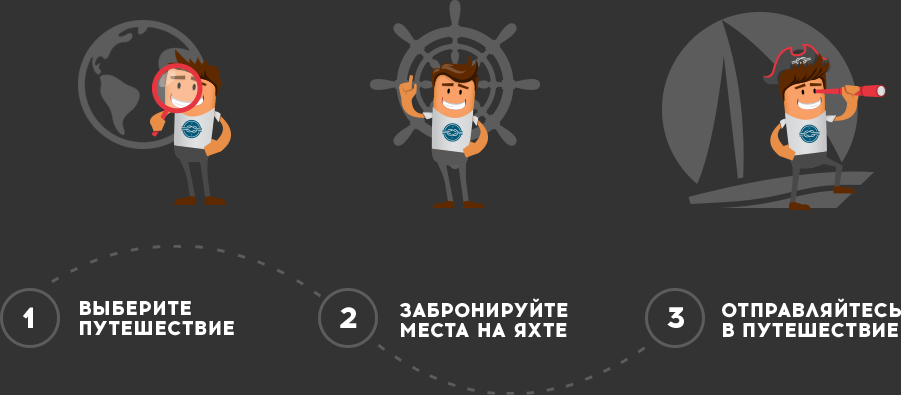
<style>
.page{position:relative;width:901px;height:395px;background:#333333}
.page>*{position:absolute;margin:0}
.t1{font:20px/20px "Acrom-ExtraBold";color:#ffffff;text-transform:uppercase}
.t2{font:30px "Acrom-ExtraBold";color:#ffffff}
</style>
<div class="page">
<p class="t1" style="left:80px;top:301px;width:154px;height:35px">выберите <br>путешествие</p>
<p class="t1" style="left:399px;top:298px;width:169px;height:40px">забронируйте <br>места на яхте</p>
<p class="t1" style="left:722px;top:298px;width:179px;height:40px">Отправляйтесь <br>в путешествие</p>
<p class="t2" style="left:22px;top:307px;width:11px;height:21px">1</p>
<p class="t2" style="left:340px;top:307px;width:17px;height:21px">2</p>
<p class="t2" style="left:667px;top:307px;width:17px;height:21px">3</p>
</div>
